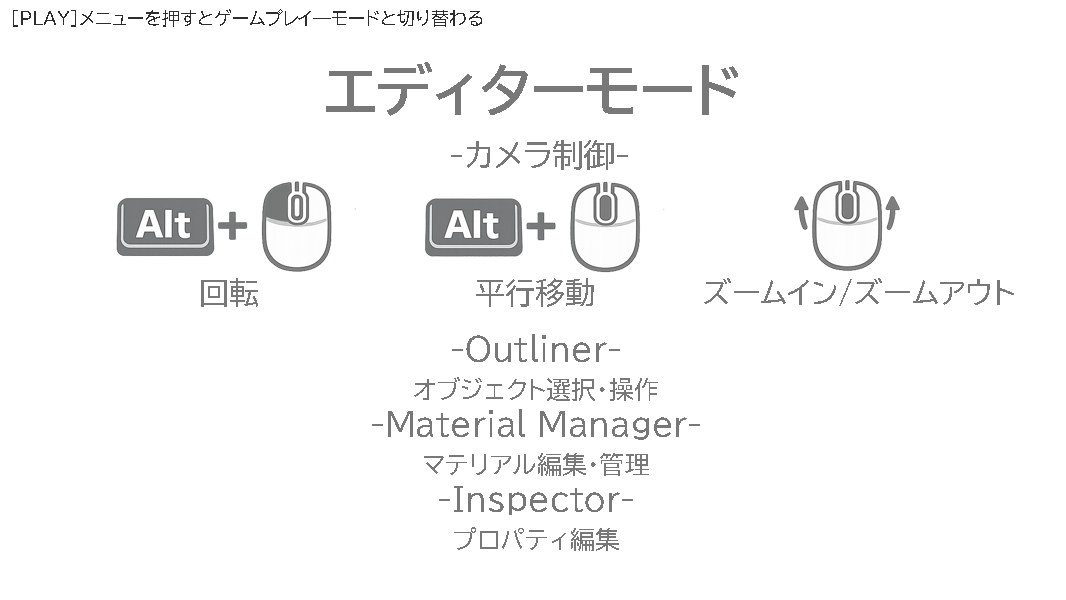
<style>
.page{position:relative;width:1066px;height:600px;background:#ffffff}
.page>*{position:absolute;margin:0}
.t1{font:18.2px "BIZ-UDPGothic";color:#2d2d2d}
.t2{font:57.3px "BIZ-UDPGothic-Bold";color:#787878}
.t3{font:30.3px "BIZ-UDPGothic";color:#787878}
.t4{font:31.6px/37.6px "BIZ-UDPGothic";color:#787878}
.t5{font:25.3px/37.6px "BIZ-UDPGothic";color:#787878}
</style>
<div class="page">
<p class="t1" style="left:13px;top:9px;width:469px;height:18px">[PLAY]メニューを押すとゲームプレイ―モードと切り替わる</p>
<p class="t2" style="left:326px;top:62px;width:412px;height:54px">エディターモード</p>
<p class="t3" style="left:451px;top:140px;width:177px;height:30px">-カメラ制御-</p>
<p class="t3" style="left:201px;top:278px;width:57px;height:29px">回転</p>
<p class="t3" style="left:476px;top:278px;width:118px;height:29px">平行移動</p>
<p class="t3" style="left:704px;top:278px;width:310px;height:28px">ズームイン/ズームアウト</p>
<p class="t4" style="left:372px;top:334px;width:328px;height:217px;text-align:center">-Outliner-<br><span class="t5">オブジェクト選択・操作<br></span>-Material Manager-<br><span class="t5">マテリアル編集・管理<br></span>-Inspector-<br><span class="t5">プロパティ編集</span></p>
</div>
